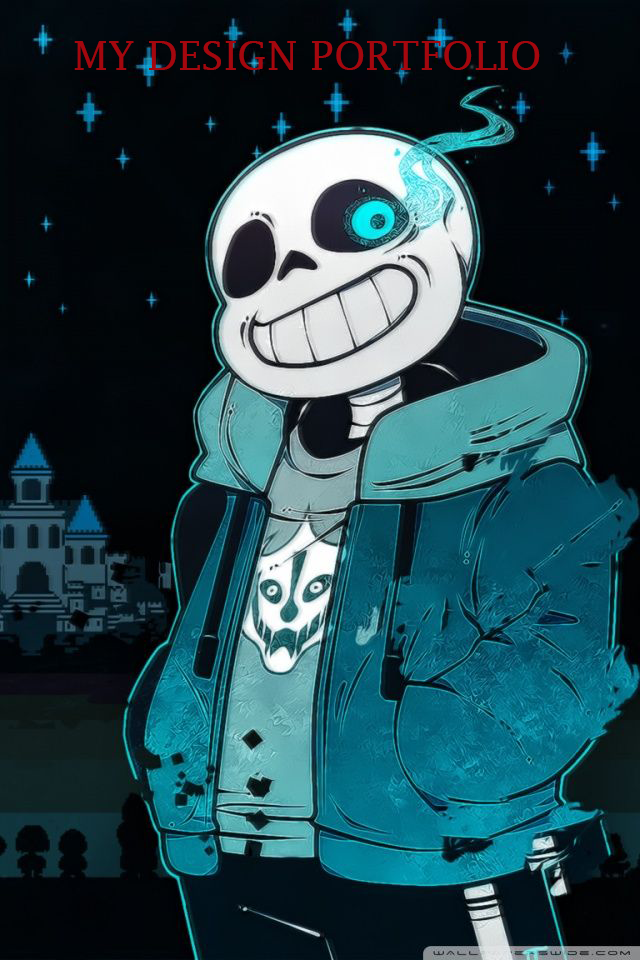
<style>
.page{position:relative;width:640px;height:960px}
.page>*{position:absolute;margin:0}
.t1{font:40px "LucidaFax";color:#a4070e}
</style>
<div class="page">
<p class="t1" style="left:74px;top:41px;width:466px;height:29px">MY DESIGN PORTFOLIO</p>
</div>
